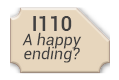
<style>
.page{position:relative;width:119px;height:80px;background:#e7d6bd}
.page>*{position:absolute;margin:0}
.t1{font:16px/14px "Roboto-Italic";color:#414040}
</style>
<div class="page">
<p class="t1" style="left:22px;top:32px;width:60px;height:31px;text-align:center">A happy<br>ending?</p>
</div>
